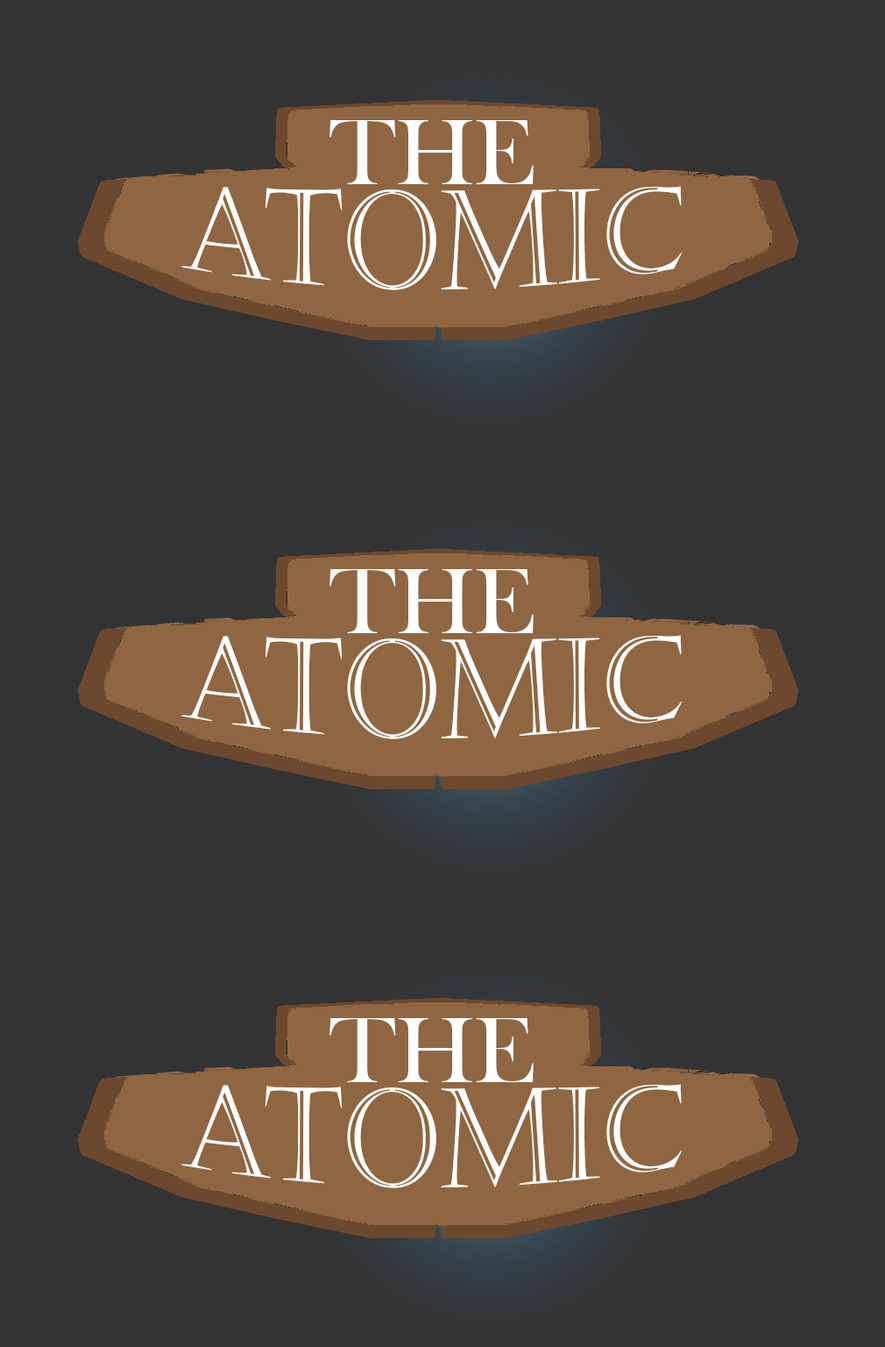
<style>
.page{position:relative;width:885px;height:1347px;background:#333333}
.page>*{position:absolute;margin:0}
.t1{font:96.4px "BaskOldFace";color:#ffffff}
.t2{font:111.3px "Castellar";color:#ffffff}
</style>
<div class="page">
<p class="t1" style="left:330px;top:120px;width:204px;height:64px">THE</p>
<p class="t2" style="left:181px;top:186px;width:502px;height:104px">ATOMIC</p>
<p class="t1" style="left:330px;top:569px;width:204px;height:64px">THE</p>
<p class="t2" style="left:181px;top:635px;width:502px;height:104px">ATOMIC</p>
<p class="t1" style="left:330px;top:1018px;width:204px;height:64px">THE</p>
<p class="t2" style="left:181px;top:1084px;width:502px;height:104px">ATOMIC</p>
</div>
